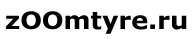
<style>
.page{position:relative;width:194px;height:39px;background:#ffffff}
.page>*{position:absolute;margin:0}
.t1{font:24px "Verdana-Bold";color:#000000;scale:1.06 1}
</style>
<div class="page">
<p class="t1" style="left:6px;top:11px;width:181px;height:23px">zOOmtyre.ru</p>
</div>
